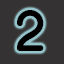
<style>
.page{position:relative;width:64px;height:64px;background:#343232}
.page>*{position:absolute;margin:0}
.t1{font:60px "Neon80s";color:#000000}
</style>
<div class="page">
<p class="t1" style="left:17px;top:10px;width:27px;height:41px">2</p>
</div>
